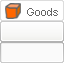
<style>
.page{position:relative;width:69px;height:63px;background:#ffffff}
.page>*{position:absolute;margin:0}
.t1{font:11px "ArialMT";color:#666666}
</style>
<div class="page">
<p class="t1" style="left:27px;top:8px;width:31px;height:8px">Goods</p>
</div>
